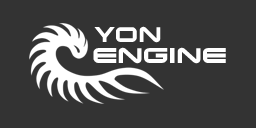
<style>
.page{position:relative;width:256px;height:128px;background:#333333}
.page>*{position:absolute;margin:0}
.t1{font:20px "Xoireqe";letter-spacing:0.05em;color:#ffffff}
.t2{font:20px "Xoireqe";letter-spacing:0.05em;color:#ffffff;scale:1.1 1}
</style>
<div class="page">
<p class="t1" style="left:94px;top:27px;width:21px;height:15px">Y</p>
<p class="t1" style="left:116px;top:26px;width:45px;height:17px">ON</p>
<p class="t2" style="left:93px;top:47px;width:133px;height:17px">ENGINE</p>
</div>
